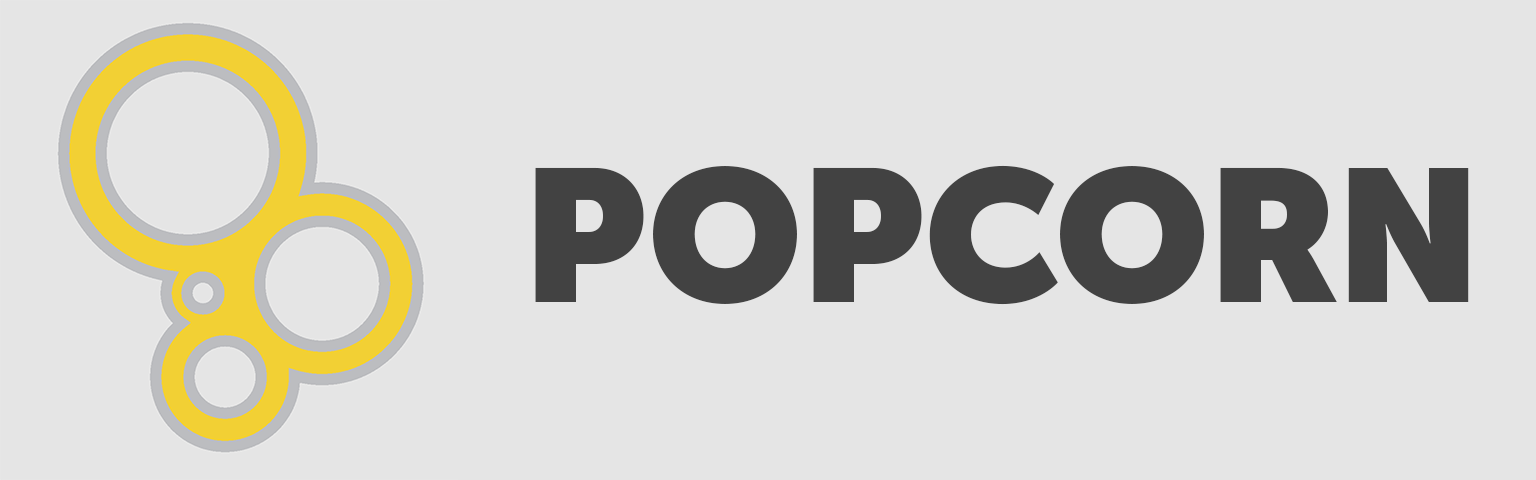
<style>
.page{position:relative;width:1536px;height:480px;background:#e5e5e5}
.page>*{position:absolute;margin:0}
.t1{font:187.5px "MuseoSansDisplay-Black";color:#424242}
</style>
<div class="page">
<p class="t1" style="left:535px;top:165px;width:934px;height:140px">POPCORN</p>
</div>
